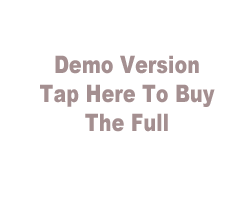
<style>
.page{position:relative;width:250px;height:200px;background:#ffffff}
.page>*{position:absolute;margin:0}
.t1{font:24px "Arial-Black";color:#a48f90;scale:0.8 1}
</style>
<div class="page">
<p class="t1" style="left:40px;top:55px;width:175px;height:77px;text-align:center">Demo Version<br>Tap Here To Buy<br>The Full</p>
</div>
